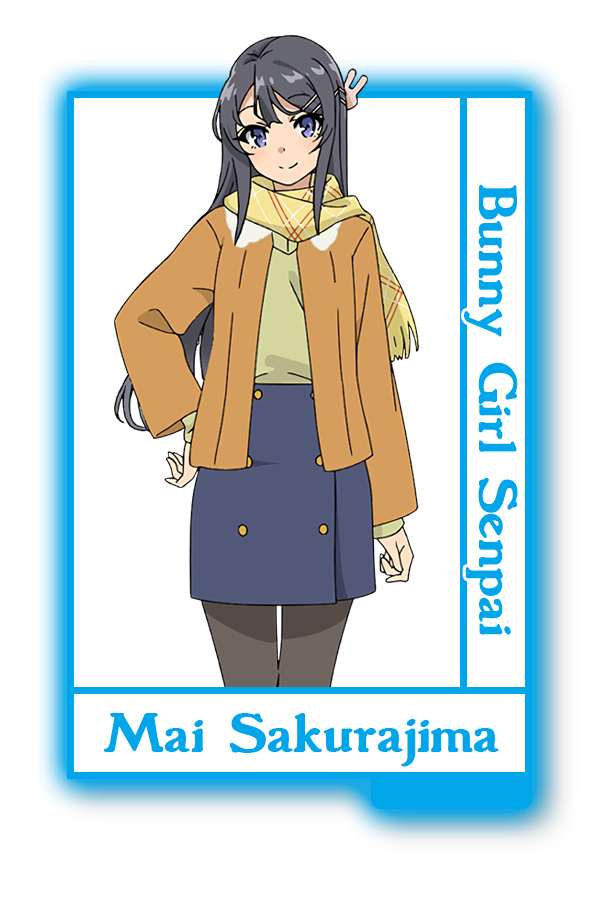
<style>
.page{position:relative;width:600px;height:900px;background:#ffffff}
.page>*{position:absolute;margin:0}
.t1{font:48.8px "Grantham-Bold";color:#0ba3e1}
.t2{font:50.5px "Grantham-Bold";color:#0ba3e1}
</style>
<div class="page">
<p class="t1" style="left:464px;top:184px;width:54px;height:451px;rotate:90deg">Bunny Girl Senpai</p>
<p class="t2" style="left:104px;top:713px;width:395px;height:54px">Mai Sakurajima</p>
</div>
